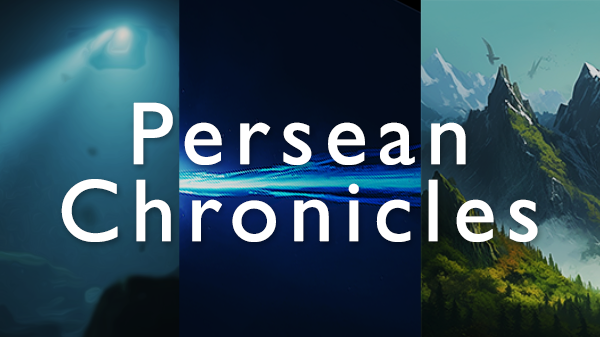
<style>
.page{position:relative;width:600px;height:337px}
.page>*{position:absolute;margin:0}
.t1{font:89px/77px "GillSansMT";letter-spacing:0.09em;color:#ffffff;font-weight:bold}
</style>
<div class="page">
<p class="t1" style="left:61px;top:102px;width:477px;height:140px;text-align:center">Persean <br>Chronicles</p>
</div>
